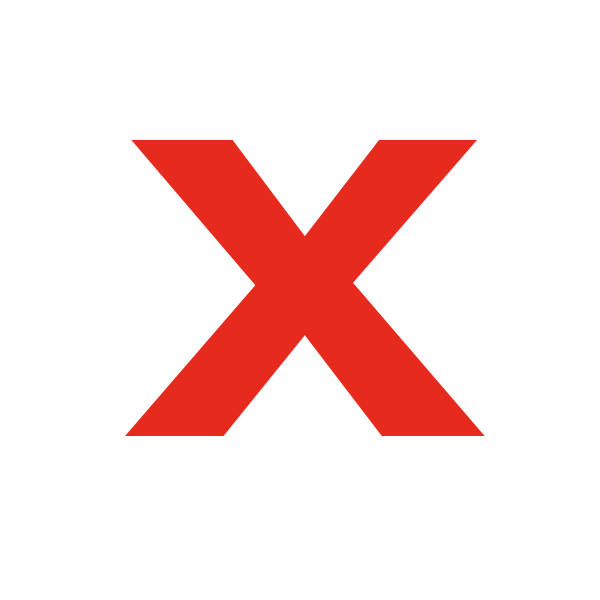
<style>
.page{position:relative;width:600px;height:600px;background:#ffffff}
.page>*{position:absolute;margin:0}
.t1{font:411px "Helvetica-Bold";color:#e62b1e;scale:1.37 1}
.t2{font:256.9px "Arial-ItalicMT";color:#000000;scale:1.37 1}
</style>
<div class="page">
<p class="t1" style="left:125px;top:139px;width:360px;height:297px"><span class="t2"><br></span>X</p>
</div>
